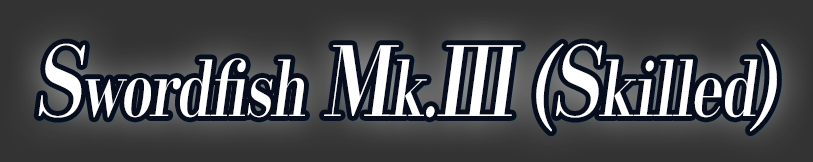
<style>
.page{position:relative;width:813px;height:162px}
.page>*{position:absolute;margin:0}
.t1{font:76.8px "KochoStd-Heavy";letter-spacing:-0.02em;color:#ffffff;font-style:italic;scale:0.75 1}
.t2{font:96px "KochoStd-Heavy";letter-spacing:-0.02em;color:#ffffff;font-style:italic;scale:0.75 1}
</style>
<div class="page">
<p class="t1" style="left:38px;top:43px;width:739px;height:89px"><span class="t2">S</span>wordfish <span class="t2">M</span>k.<span class="t2">III (S</span>killed<span class="t2">)</span></p>
</div>
